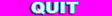
<style>
.page{position:relative;width:112px;height:16px;background:#ff00ff}
.page>*{position:absolute;margin:0}
.t1{font:14.7px "Arial-Black";color:#d6f7ff;scale:1.17 1}
</style>
<div class="page">
<p class="t1" style="left:31px;top:2px;width:48px;height:12px">QUIT</p>
</div>
